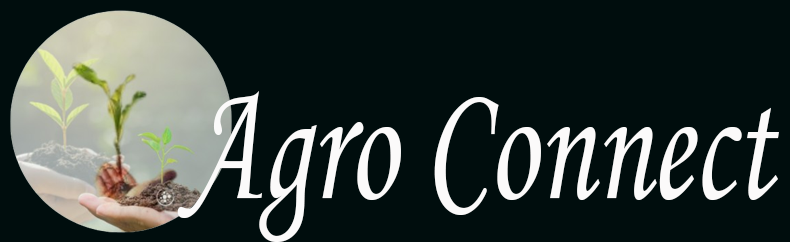
<style>
.page{position:relative;width:790px;height:242px;background:#000d0d}
.page>*{position:absolute;margin:0}
.t1{font:172.9px "MonotypeCorsiva";color:#fbfafa;scale:0.71 1}
</style>
<div class="page">
<p class="t1" style="left:177px;top:91px;width:602px;height:151px">Agro Connect</p>
</div>
